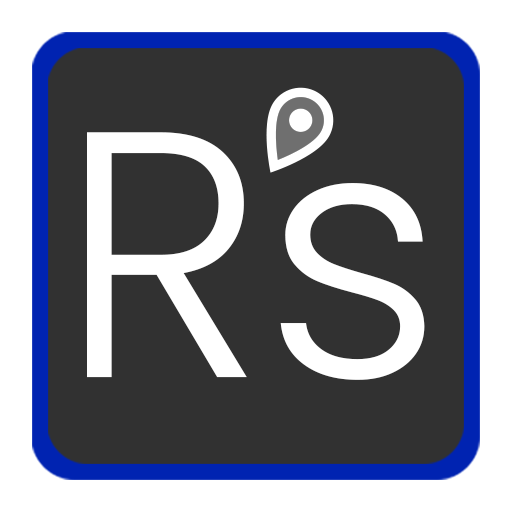
<style>
.page{position:relative;width:512px;height:512px;background:#313131}
.page>*{position:absolute;margin:0}
.t1{font:350px "Poppins-Light";color:#ffffff}
</style>
<div class="page">
<p class="t1" style="left:87px;top:132px;width:338px;height:248px">Rs</p>
</div>
